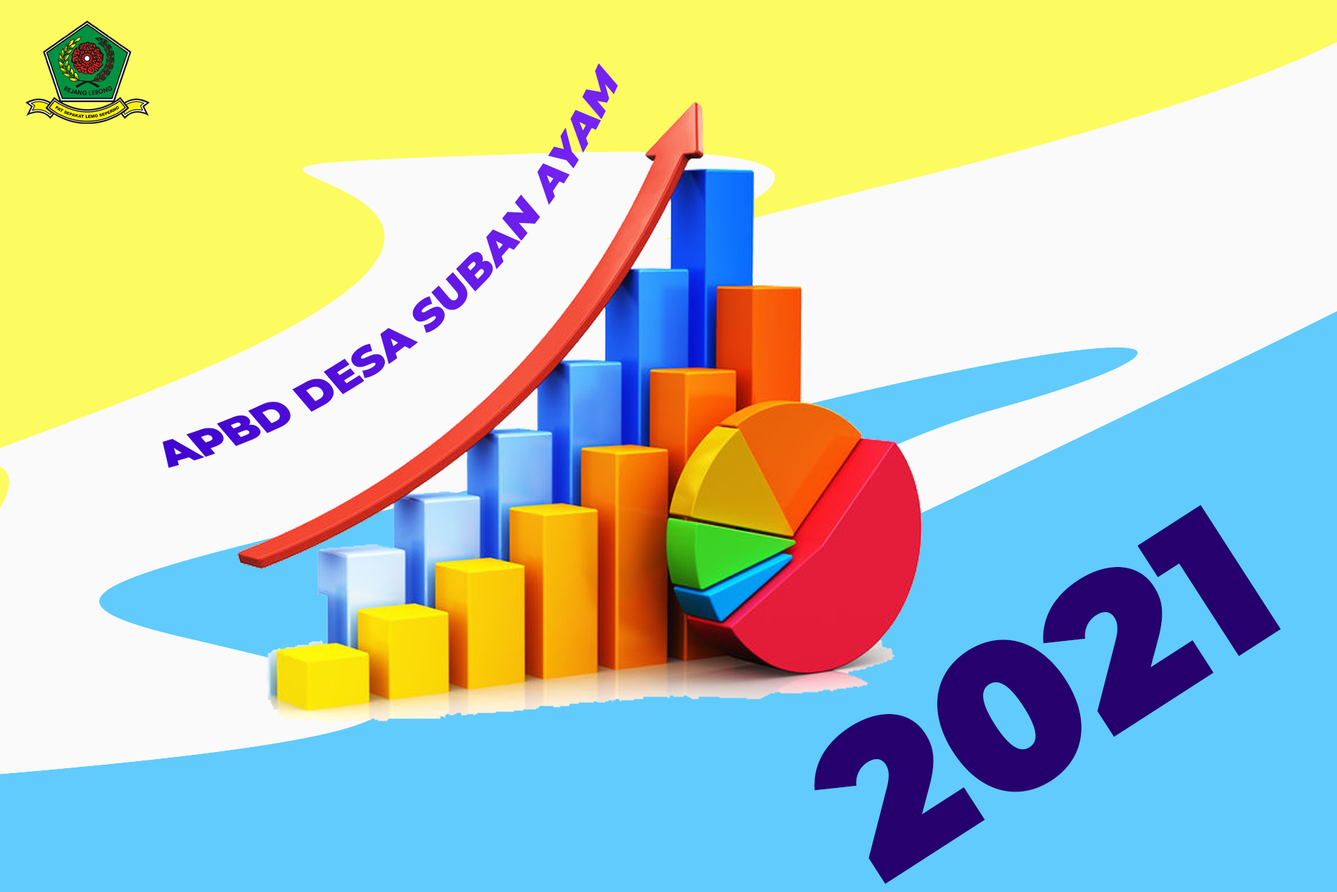
<style>
.page{position:relative;width:1337px;height:892px;background:#60cbfc}
.page>*{position:absolute;margin:0}
.t1{font:42.2px "Montserrat-Black";color:#6017e5}
.t2{font:211.1px "Montserrat-Black";color:#26016e}
</style>
<div class="page">
<p class="t1" style="left:163px;top:63px;width:455px;height:406px;rotate:-41deg">APBD DESA SUBAN AYAM</p>
<p class="t2" style="left:814px;top:504px;width:467px;height:380px;rotate:-33deg">2021</p>
</div>
